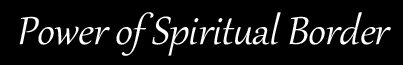
<style>
.page{position:relative;width:403px;height:65px;background:#000000}
.page>*{position:absolute;margin:0}
.t1{font:48px "Gabriola";color:#ffffff;font-style:italic}
</style>
<div class="page">
<p class="t1" style="left:19px;top:12px;width:372px;height:44px">Power of Spiritual Border</p>
</div>
